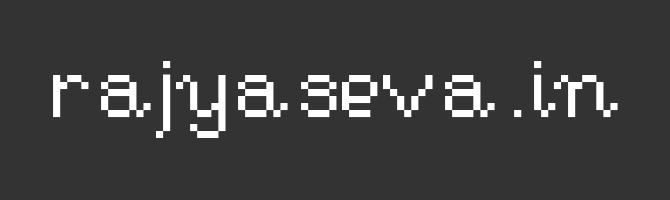
<style>
.page{position:relative;width:670px;height:200px;background:#333333}
.page>*{position:absolute;margin:0}
.t1{font:112.5px "RSEHandwritingPi";letter-spacing:-0.01em;color:#ffffff}
</style>
<div class="page">
<p class="t1" style="left:53px;top:61px;width:565px;height:77px">rajyaseva.in</p>
</div>
